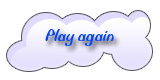
<style>
.page{position:relative;width:160px;height:80px;background:#ffffff}
.page>*{position:absolute;margin:0}
.t1{font:18px "BiffoMTStd";color:#0144ff}
</style>
<div class="page">
<p class="t1" style="left:45px;top:29px;width:69px;height:17px">Play again</p>
</div>
